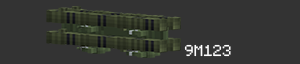
<style>
.page{position:relative;width:300px;height:64px;background:#333333}
.page>*{position:absolute;margin:0}
.t1{font:12.6px "Minecraft";color:#ffffff}
</style>
<div class="page">
<p class="t1" style="left:184px;top:44px;width:47px;height:13px">9M123</p>
</div>
